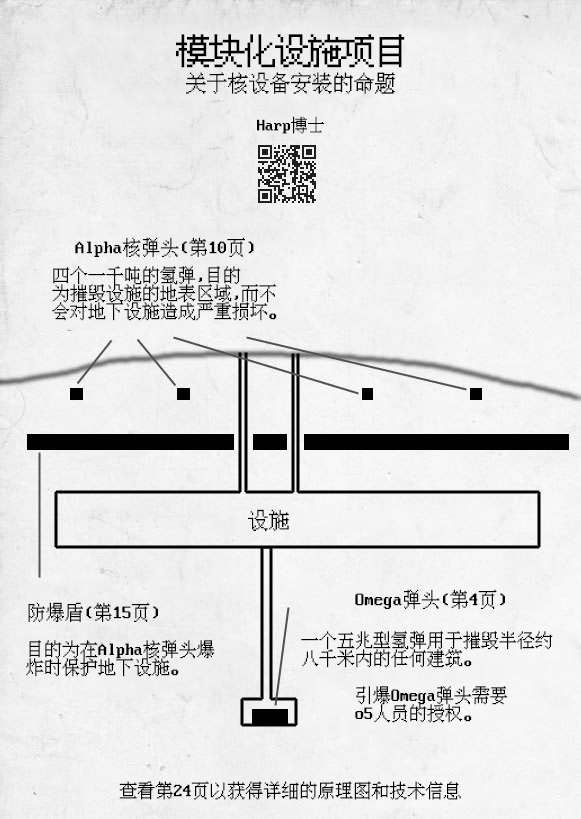
<style>
.page{position:relative;width:581px;height:819px}
.page>*{position:absolute;margin:0}
.t1{font:33px "VonwaonBitmap-12px";color:#000000}
.t2{font:21px "VonwaonBitmap-16px";color:#000000}
.t3{font:17px "VonwaonBitmap-16px";color:#000000}
.t4{font:19px "VonwaonBitmap-16px";color:#000000}
.t5{font:18px/18px "VonwaonBitmap-16px";color:#000000}
.t6{font:18px "VonwaonBitmap-16px";color:#000000}
</style>
<div class="page">
<p class="t1" style="left:176px;top:34px;width:229px;height:34px">模块化设施项目</p>
<p class="t2" style="left:186px;top:72px;width:209px;height:22px">关于核设备安装的命题</p>
<p class="t3" style="left:257px;top:116px;width:67px;height:18px">Harp博士</p>
<p class="t4" style="left:75px;top:237px;width:179px;height:20px">Alpha核弹头(第10页)</p>
<p class="t5" style="left:52px;top:266px;width:225px;height:55px">四个一千吨的氢弹,目的<br>为摧毁设施的地表区域,而不<br>会对地下设施造成严重损坏。</p>
<p class="t2" style="left:248px;top:509px;width:41px;height:22px">设施</p>
<p class="t4" style="left:355px;top:589px;width:150px;height:20px">Omega弹头(第4页)</p>
<p class="t4" style="left:28px;top:602px;width:130px;height:20px">防爆盾(第15页)</p>
<p class="t5" style="left:26px;top:640px;width:189px;height:37px">目的为在Alpha核弹头爆<br>炸时保护地下设施。</p>
<p class="t5" style="left:301px;top:631px;width:252px;height:37px">一个五兆型氢弹用于摧毁半径约<br>八千米内的任何建筑。</p>
<p class="t5" style="left:355px;top:686px;width:153px;height:37px">引爆Omega弹头需要<br>o5人员的授权。</p>
<p class="t6" style="left:119px;top:781px;width:342px;height:19px">查看第24页以获得详细的原理图和技术信息</p>
</div>
